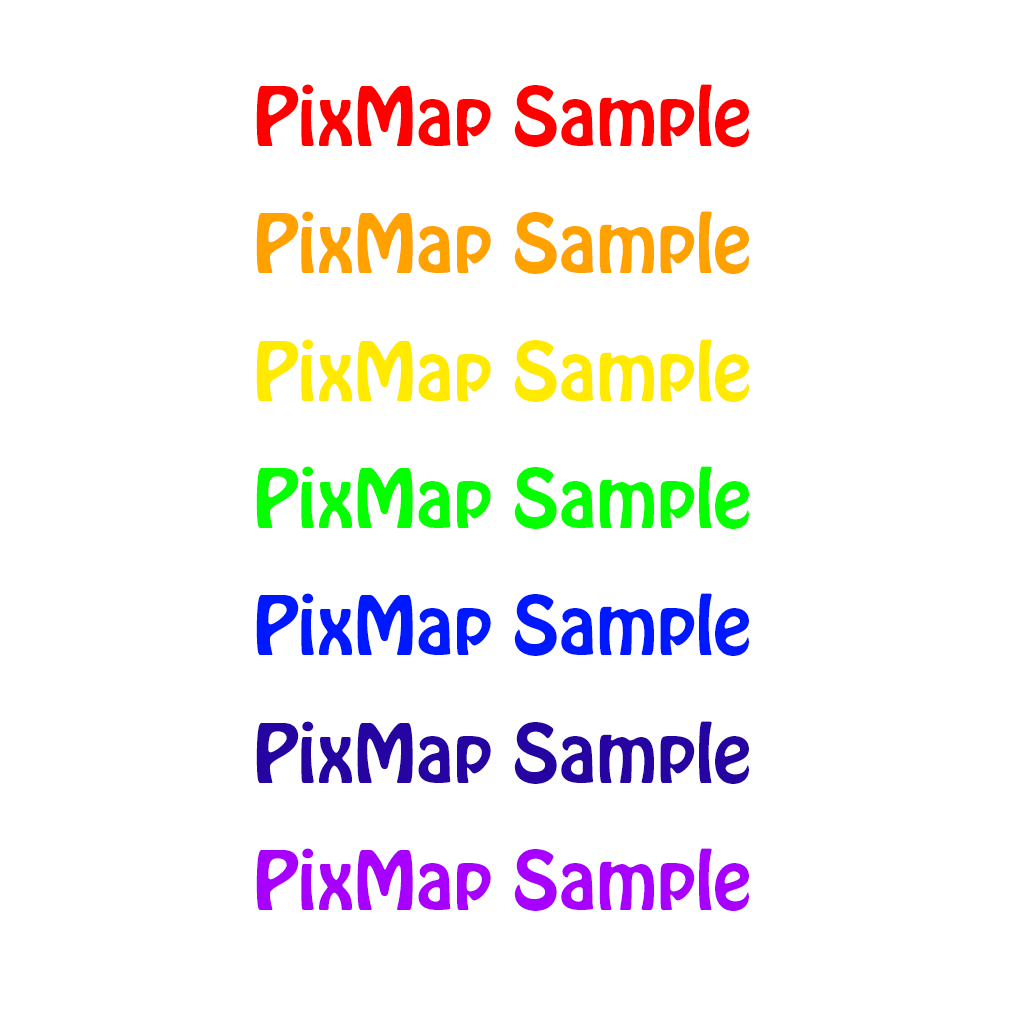
<style>
.page{position:relative;width:1024px;height:1024px;background:#ffffff}
.page>*{position:absolute;margin:0}
.t1{font:72px "HoboStd";color:#ff0000}
.t2{font:72px "HoboStd";color:#ffa200}
.t3{font:72px "HoboStd";color:#ffea00}
.t4{font:72px "HoboStd";color:#06ff00}
.t5{font:72px "HoboStd";color:#0018ff}
.t6{font:72px "HoboStd";color:#2604a2}
.t7{font:72px "HoboStd";color:#a800ff}
</style>
<div class="page">
<p class="t1" style="left:256px;top:84px;width:493px;height:63px">PixMap Sample</p>
<p class="t2" style="left:256px;top:211px;width:493px;height:63px">PixMap Sample</p>
<p class="t3" style="left:256px;top:339px;width:493px;height:63px">PixMap Sample</p>
<p class="t4" style="left:256px;top:466px;width:493px;height:63px">PixMap Sample</p>
<p class="t5" style="left:256px;top:593px;width:493px;height:63px">PixMap Sample</p>
<p class="t6" style="left:256px;top:721px;width:493px;height:63px">PixMap Sample</p>
<p class="t7" style="left:256px;top:848px;width:493px;height:63px">PixMap Sample</p>
</div>
